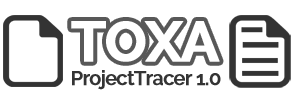
<style>
.page{position:relative;width:300px;height:104px;background:#ffffff}
.page>*{position:absolute;margin:0}
.t1{font:56.4px "Raleway-Bold";letter-spacing:-0.05em;color:#ffffff;font-weight:bold}
.t2{font:19.7px "Raleway-SemiBold";letter-spacing:-0.05em;color:#343434;font-weight:bold}
</style>
<div class="page">
<p class="t1" style="left:71px;top:21px;width:149px;height:41px">TOXA</p>
<p class="t2" style="left:72px;top:70px;width:149px;height:20px">ProjectTracer 1.0</p>
</div>
